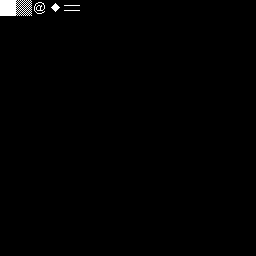
<style>
.page{position:relative;width:256px;height:256px;background:#000000}
.page>*{position:absolute;margin:0}
.t1{font:12px "ArialMT";color:#ffffff}
</style>
<div class="page">
<p class="t1" style="left:34px;top:2px;width:11px;height:12px">@</p>
</div>
